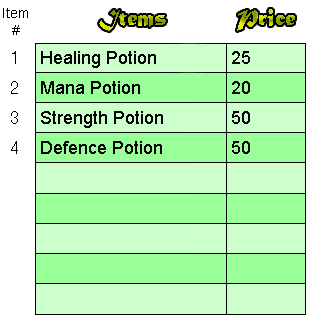
<style>
.page{position:relative;width:311px;height:315px;background:#ccffcc}
.page>*{position:absolute;margin:0}
.t1{font:14px "ArialMT";color:#000000}
.t2{font:24px "MaturaMTScriptCapitals"}
.t3{font:18px "Helvetica-Narrow";color:#000000}
.t4{font:18px "ArialMT";color:#000000}
</style>
<div class="page">
<p class="t1" style="left:3px;top:8px;width:25px;height:27px;text-align:center">Item<br>#</p>
<p class="t2" style="left:99px;top:10px;width:67px;height:21px">Items</p>
<p class="t2" style="left:237px;top:9px;width:58px;height:22px">Price</p>
<p class="t3" style="left:12px;top:51px;width:4px;height:13px">1</p>
<p class="t4" style="left:41px;top:51px;width:115px;height:17px">Healing Potion</p>
<p class="t4" style="left:232px;top:51px;width:18px;height:13px">25</p>
<p class="t3" style="left:11px;top:81px;width:7px;height:13px">2</p>
<p class="t4" style="left:41px;top:81px;width:99px;height:13px">Mana Potion</p>
<p class="t4" style="left:232px;top:81px;width:18px;height:13px">20</p>
<p class="t3" style="left:11px;top:111px;width:7px;height:13px">3</p>
<p class="t4" style="left:41px;top:111px;width:122px;height:17px">Strength Potion</p>
<p class="t4" style="left:232px;top:111px;width:18px;height:13px">50</p>
<p class="t3" style="left:11px;top:141px;width:7px;height:13px">4</p>
<p class="t4" style="left:41px;top:141px;width:121px;height:13px">Defence Potion</p>
<p class="t4" style="left:232px;top:141px;width:18px;height:13px">50</p>
</div>
